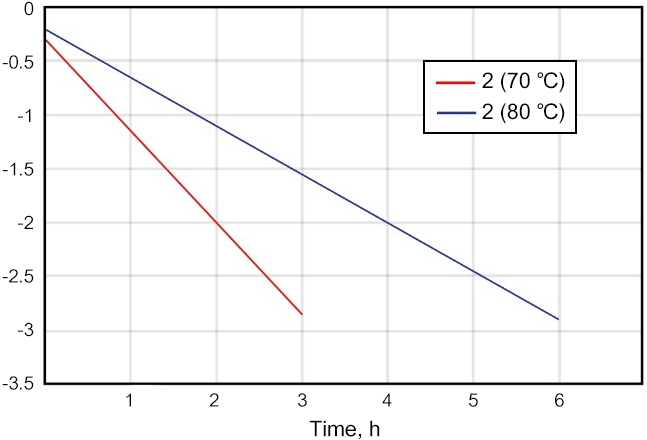
<style>
.page{position:relative;width:647px;height:440px;background:#ffffff}
.page>*{position:absolute;margin:0}
.t1{font:18.3px "ArialUnicodeMS";color:#000000}
.t2{font:21.4px "ArialUnicodeMS";color:#000000}
</style>
<div class="page">
<p class="t1" style="left:2px;top:1px;width:32px;height:389px;text-align:right">0<br>-0.5<br>-1<br>-1.5<br>-2<br>-2.5<br>-3<br>-3.5</p>
<p class="t2" style="left:482px;top:72px;width:83px;height:21px">2 (70 ℃)</p>
<p class="t2" style="left:482px;top:103px;width:83px;height:21px">2 (80 ℃)</p>
<p class="t1" style="left:126px;top:393px;width:5px;height:14px">1</p>
<p class="t1" style="left:209px;top:393px;width:10px;height:14px">2</p>
<p class="t1" style="left:298px;top:393px;width:9px;height:14px">3</p>
<p class="t1" style="left:382px;top:393px;width:10px;height:14px">4</p>
<p class="t1" style="left:469px;top:393px;width:9px;height:14px">5</p>
<p class="t1" style="left:555px;top:393px;width:9px;height:14px">6</p>
<p class="t2" style="left:309px;top:420px;width:71px;height:20px">Time, h</p>
</div>
